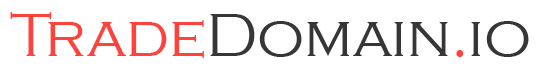
<style>
.page{position:relative;width:540px;height:68px;background:#ffffff}
.page>*{position:absolute;margin:0}
.t1{font:62.5px "CopperplateGothic-Light";color:#353635}
.t2{font:62.5px "CopperplateGothic-Light";color:#ff423c}
</style>
<div class="page">
<p class="t1" style="left:10px;top:12px;width:519px;height:46px"><span class="t2">Trade</span>Domain<span class="t2">.</span>io</p>
</div>
